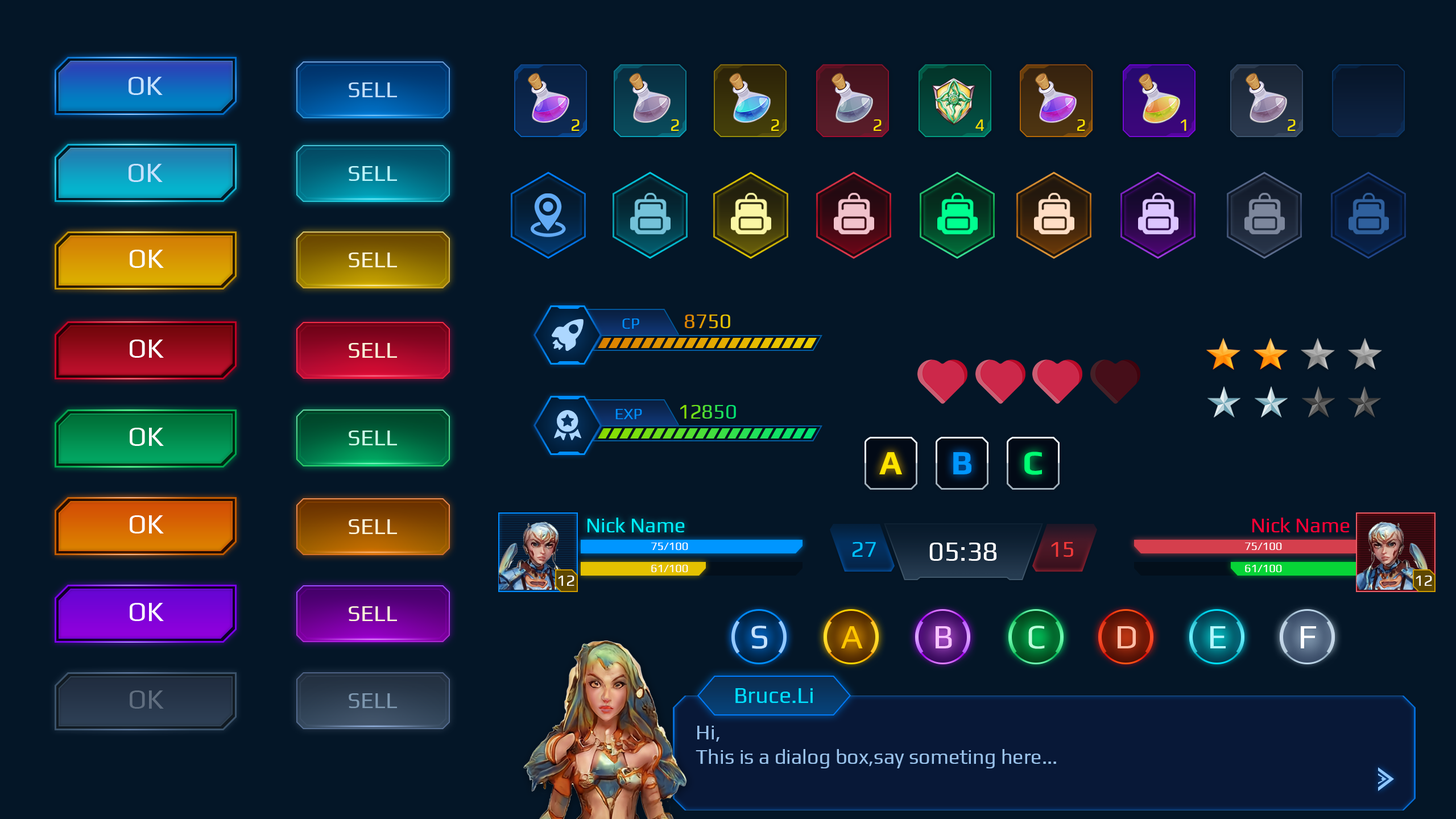
<style>
.page{position:relative;width:1456px;height:819px;background:#041627}
.page>*{position:absolute;margin:0}
.t1{font:27.3px "Play-Regular";color:#c6e2ff}
.t2{font:22.7px "Play-Regular";color:#c4e1ff}
.t3{font:17.1px "Play-Regular";color:#ffe400}
.t4{font:22.7px "Play-Regular";color:#bef8ff}
.t5{font:27.3px "Play-Regular";color:#ffffff}
.t6{font:22.7px "Play-Regular";color:#fff8db}
.t7{font:20.5px "Play-Regular"}
.t8{font:15.9px "Play-Regular";color:#0090ff}
.t9{font:22.7px "Play-Regular";color:#ceffea}
.t10{font:34.1px "Play-Bold";color:#ffe400}
.t11{font:34.1px "Play-Bold";color:#0096ff}
.t12{font:34.1px "Play-Bold";color:#00ff72}
.t13{font:20.5px "Play-Regular";color:#00f0ff}
.t14{font:20.5px "Play-Regular";color:#ff0036}
.t15{font:11.4px "Play-Regular";color:#ffffff}
.t16{font:22.7px "Play-Regular";color:#00c0ff}
.t17{font:22.7px "Play-Regular";color:#f03939}
.t18{font:15.9px "Play-Regular";color:#ffffff}
.t19{font:34.2px "Play-Regular";color:#c5e2ff}
.t20{font:34.2px "Play-Regular";color:#ffc600}
.t21{font:34.2px "Play-Regular";color:#f9c4ff}
.t22{font:34.2px "Play-Regular";color:#b9ffda}
.t23{font:34.2px "Play-Regular";color:#ffbea7}
.t24{font:34.2px "Play-Regular";color:#b2f7ff}
.t25{font:34.2px "Play-Regular";color:#ffffff}
.t26{font:22.7px "Play-Regular";color:#00deff}
.t27{font:27.3px "Play-Regular";color:#606e7f}
.t28{font:22.7px "Play-Regular";color:#7f99b1}
.t29{font:20.5px/24.5px "Play-Regular";color:#99c2eb}
</style>
<div class="page">
<p class="t1" style="left:129px;top:77px;width:34px;height:18px">OK</p>
<p class="t2" style="left:349px;top:82px;width:48px;height:15px">SELL</p>
<p class="t3" style="left:572px;top:119px;width:8px;height:12px">2</p>
<p class="t3" style="left:671px;top:119px;width:8px;height:12px">2</p>
<p class="t3" style="left:771px;top:119px;width:8px;height:12px">2</p>
<p class="t3" style="left:874px;top:119px;width:8px;height:12px">2</p>
<p class="t3" style="left:975px;top:119px;width:9px;height:12px">4</p>
<p class="t3" style="left:1077px;top:119px;width:8px;height:12px">2</p>
<p class="t3" style="left:1181px;top:119px;width:5px;height:12px">1</p>
<p class="t3" style="left:1288px;top:119px;width:8px;height:12px">2</p>
<p class="t1" style="left:129px;top:164px;width:34px;height:18px">OK</p>
<p class="t4" style="left:349px;top:166px;width:48px;height:15px">SELL</p>
<p class="t5" style="left:130px;top:250px;width:34px;height:18px">OK</p>
<p class="t6" style="left:349px;top:253px;width:48px;height:14px">SELL</p>
<p class="t7" style="left:685px;top:315px;width:45px;height:13px">8750</p>
<p class="t8" style="left:622px;top:318px;width:17px;height:11px">CP</p>
<p class="t5" style="left:130px;top:340px;width:34px;height:18px">OK</p>
<p class="t6" style="left:349px;top:343px;width:48px;height:15px">SELL</p>
<p class="t8" style="left:615px;top:409px;width:27px;height:10px">EXP</p>
<p class="t7" style="left:680px;top:405px;width:56px;height:14px">12850</p>
<p class="t5" style="left:130px;top:428px;width:34px;height:18px">OK</p>
<p class="t9" style="left:349px;top:431px;width:48px;height:14px">SELL</p>
<p class="t10" style="left:879px;top:452px;width:23px;height:22px">A</p>
<p class="t11" style="left:953px;top:452px;width:18px;height:22px">B</p>
<p class="t12" style="left:1024px;top:452px;width:18px;height:23px">C</p>
<p class="t5" style="left:130px;top:515px;width:34px;height:18px">OK</p>
<p class="t6" style="left:349px;top:519px;width:48px;height:15px">SELL</p>
<p class="t13" style="left:588px;top:518px;width:97px;height:14px">Nick Name</p>
<p class="t14" style="left:1252px;top:518px;width:98px;height:14px">Nick Name</p>
<p class="t15" style="left:651px;top:543px;width:37px;height:7px">75/100</p>
<p class="t16" style="left:852px;top:542px;width:24px;height:15px">27</p>
<p class="t5" style="left:929px;top:543px;width:67px;height:18px">05:38</p>
<p class="t17" style="left:1051px;top:542px;width:22px;height:15px">15</p>
<p class="t15" style="left:1245px;top:543px;width:37px;height:7px">75/100</p>
<p class="t15" style="left:651px;top:565px;width:37px;height:7px">61/100</p>
<p class="t15" style="left:1245px;top:565px;width:37px;height:7px">61/100</p>
<p class="t18" style="left:558px;top:576px;width:16px;height:10px">12</p>
<p class="t18" style="left:1416px;top:576px;width:16px;height:10px">12</p>
<p class="t5" style="left:130px;top:603px;width:34px;height:18px">OK</p>
<p class="t6" style="left:349px;top:606px;width:48px;height:15px">SELL</p>
<p class="t19" style="left:751px;top:626px;width:16px;height:23px">S</p>
<p class="t20" style="left:841px;top:626px;width:22px;height:22px">A</p>
<p class="t21" style="left:936px;top:626px;width:16px;height:22px">B</p>
<p class="t22" style="left:1028px;top:626px;width:17px;height:23px">C</p>
<p class="t23" style="left:1118px;top:626px;width:18px;height:22px">D</p>
<p class="t24" style="left:1210px;top:626px;width:16px;height:22px">E</p>
<p class="t25" style="left:1301px;top:626px;width:15px;height:22px">F</p>
<p class="t26" style="left:735px;top:688px;width:78px;height:15px">Bruce.Li</p>
<p class="t27" style="left:130px;top:690px;width:34px;height:19px">OK</p>
<p class="t28" style="left:349px;top:693px;width:48px;height:15px">SELL</p>
<p class="t29" style="left:696px;top:726px;width:360px;height:42px">Hi,<br>This is a dialog box,say someting here...</p>
</div>
